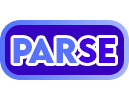
<style>
.page{position:relative;width:129px;height:100px;background:#ffffff}
.page>*{position:absolute;margin:0}
.t1{font:31px "LEMONMILK-Bold";color:#5672ff}
.t2{font:31px "LEMONMILK-Bold";color:#4000e2}
</style>
<div class="page">
<p class="t1" style="left:13px;top:38px;width:102px;height:25px">par<span class="t2">se</span></p>
</div>
